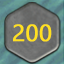
<style>
.page{position:relative;width:64px;height:64px}
.page>*{position:absolute;margin:0}
.t1{font:23.4px "SegoeUI";letter-spacing:0.01em;color:#ffe020;font-weight:bold}
</style>
<div class="page">
<p class="t1" style="left:13px;top:24px;width:39px;height:18px">200</p>
</div>
